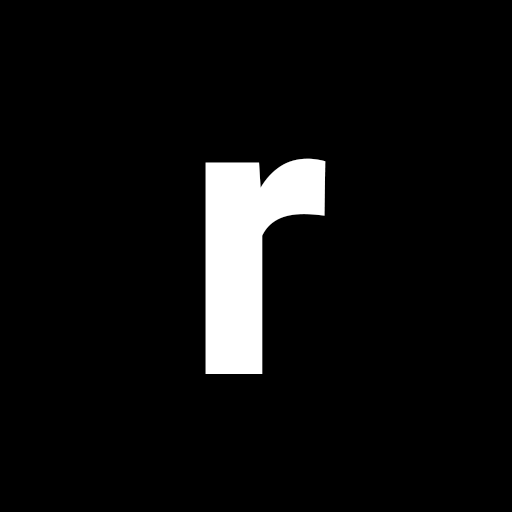
<style>
.page{position:relative;width:512px;height:512px;background:#000000}
.page>*{position:absolute;margin:0}
.t1{font:400px "Roboto-Bold";color:#ffffff}
</style>
<div class="page">
<p class="t1" style="left:205px;top:158px;width:121px;height:216px">r</p>
</div>
